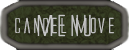
<style>
.page{position:relative;width:129px;height:50px}
.page>*{position:absolute;margin:0}
.t1{font:20px "AlienLeague";color:#c6c6c6}
.t2{font:28px "AlienLeague";color:#c6c6c6}
</style>
<div class="page">
<p class="t1" style="left:15px;top:17px;width:99px;height:17px">cancel move</p>
<p class="t2" style="left:37px;top:14px;width:54px;height:23px">Menu</p>
</div>
